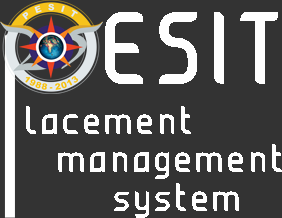
<style>
.page{position:relative;width:282px;height:218px;background:#333333}
.page>*{position:absolute;margin:0}
.t1{font:82px "JUICEBold-Bold";color:#ffffff}
.t2{font:32px "JUICEBold-Bold";color:#fefefe}
</style>
<div class="page">
<p class="t1" style="left:105px;top:12px;width:173px;height:72px">ESIT</p>
<p class="t2" style="left:26px;top:106px;width:256px;height:112px">lacement<br>    management <br>           system</p>
</div>
